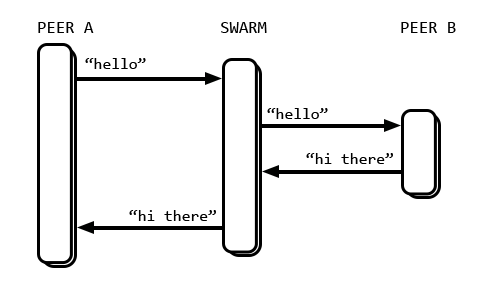
<style>
.page{position:relative;width:499px;height:290px;background:#ffffff}
.page>*{position:absolute;margin:0}
.t1{font:17px "Consolas";color:#000000;text-transform:uppercase}
.t2{font:16px "Consolas";color:#000000}
</style>
<div class="page">
<p class="t1" style="left:38px;top:22px;width:56px;height:11px">peer a</p>
<p class="t1" style="left:221px;top:22px;width:46px;height:11px">swarm</p>
<p class="t1" style="left:401px;top:22px;width:55px;height:11px">peer b</p>
<p class="t2" style="left:85px;top:58px;width:61px;height:11px">“hello”</p>
<p class="t2" style="left:267px;top:108px;width:61px;height:11px">“hello”</p>
<p class="t2" style="left:306px;top:153px;width:87px;height:11px">“hi there”</p>
<p class="t2" style="left:129px;top:210px;width:87px;height:11px">“hi there”</p>
</div>
